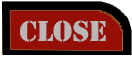
<style>
.page{position:relative;width:132px;height:58px;background:#950f07}
.page>*{position:absolute;margin:0}
.t1{font:30px "Stencil";color:#bbb7b7}
</style>
<div class="page">
<p class="t1" style="left:20px;top:20px;width:86px;height:22px">Close</p>
</div>
